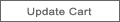
<style>
.page{position:relative;width:120px;height:22px;background:#ffffff}
.page>*{position:absolute;margin:0}
.t1{font:10px "ArialMT";letter-spacing:0.025em;color:#666666;scale:1.15 1}
</style>
<div class="page">
<p class="t1" style="left:27px;top:7px;width:65px;height:10px">Update Cart</p>
</div>
